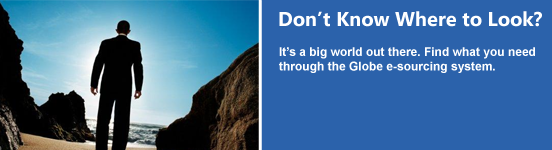
<style>
.page{position:relative;width:552px;height:150px;background:#2b62ab}
.page>*{position:absolute;margin:0}
.t1{font:20px "SegoeUI-Bold";color:#ffffff}
.t2{font:12px "Arial-BoldMT";color:#ffffff}
</style>
<div class="page">
<p class="t1" style="left:279px;top:11px;width:263px;height:16px">Don’t Know Where to Look?</p>
<p class="t2" style="left:279px;top:47px;width:256px;height:26px">It’s a big world out there. Find what you need <br>through the Globe e-sourcing system.</p>
</div>
